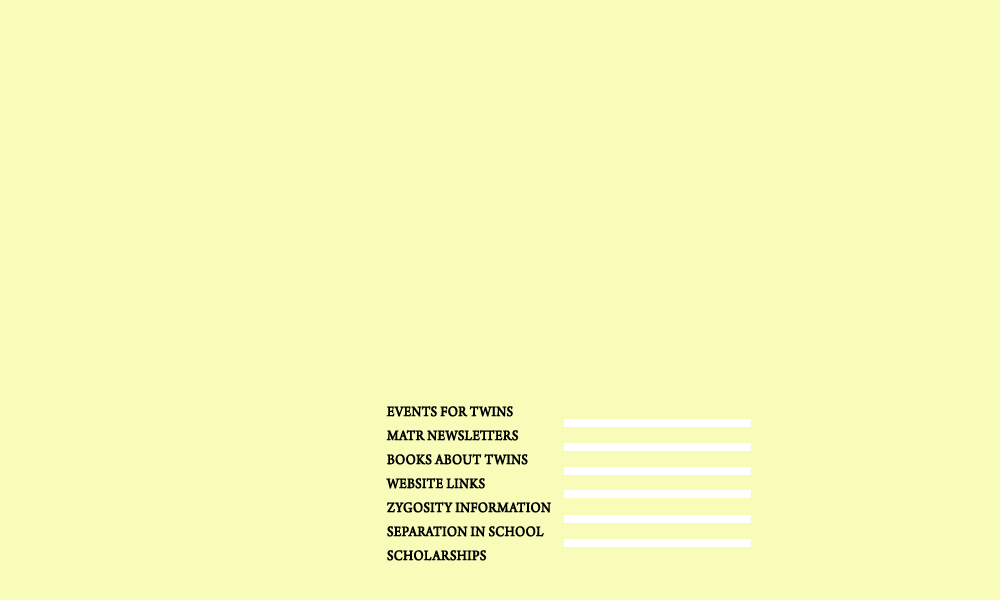
<style>
.page{position:relative;width:1000px;height:600px;background:#f9fbb9}
.page>*{position:absolute;margin:0}
.t1{font:15px/24px "ArnoPro-Regular";color:#000000;font-weight:bold;scale:0.9 1}
</style>
<div class="page">
<p class="t1" style="left:386px;top:406px;width:165px;height:155px">EVENTS FOR TWINS<br>MATR NEWSLETTERS<br>BOOKS ABOUT TWINS<br>WEBSITE LINKS<br>ZYGOSITY INFORMATION<br>SEPARATION IN SCHOOL<br>SCHOLARSHIPS</p>
</div>
